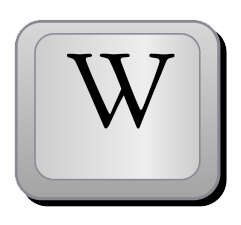
<style>
.page{position:relative;width:241px;height:225px;background:#ffffff}
.page>*{position:absolute;margin:0}
.t1{font:100.2px "DayRoman";color:#000000}
</style>
<div class="page">
<p class="t1" style="left:67px;top:53px;width:108px;height:76px">W</p>
</div>
